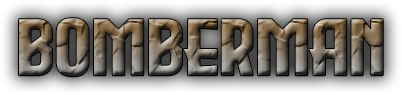
<style>
.page{position:relative;width:402px;height:95px}
.page>*{position:absolute;margin:0}
.t1{font:80px "EvilEmpire"}
</style>
<div class="page">
<p class="t1" style="left:19px;top:18px;width:364px;height:59px">BOMBERMAN</p>
</div>
